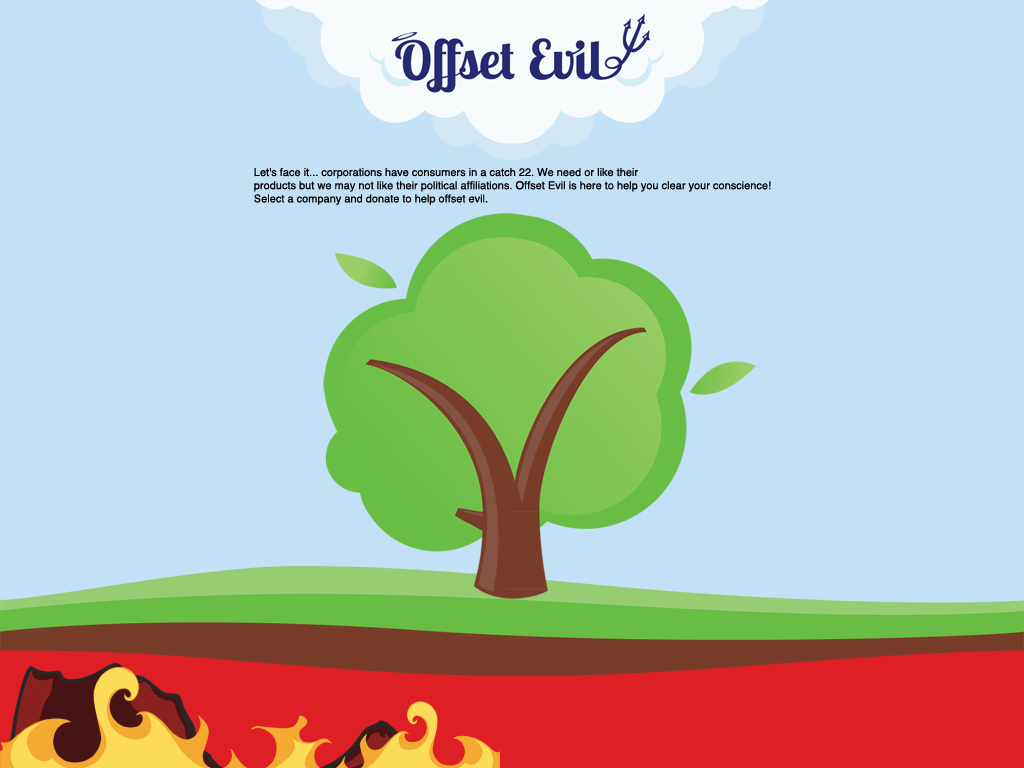
<style>
.page{position:relative;width:1024px;height:768px;background:#c3e1f6}
.page>*{position:absolute;margin:0}
.t1{font:11px "Helvetica";color:#000000}
</style>
<div class="page">
<p class="t1" style="left:254px;top:167px;width:517px;height:38px">Let's face it... corporations have consumers in a catch 22. We need or like their <br>products but we may not like their political affiliations. Offset Evil is here to help you clear your conscience! <br>Select a company and donate to help offset evil.</p>
</div>
